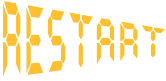
<style>
.page{position:relative;width:166px;height:81px;background:#ffffff}
.page>*{position:absolute;margin:0}
.t1{font:75px "QuartzMS";color:#ffbf2e;scale:0.5 1}
</style>
<div class="page">
<p class="t1" style="left:3px;top:1px;width:162px;height:76px">RESTART</p>
</div>
